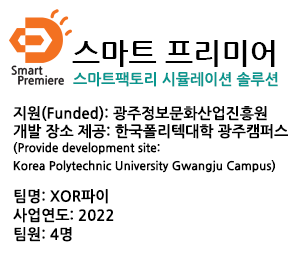
<style>
.page{position:relative;width:300px;height:280px;background:#ffffff}
.page>*{position:absolute;margin:0}
.t1{font:30px "NanumGothicBold";color:#000000}
.t2{font:15px "NanumGothicBold";color:#0a978f}
.t3{font:12px/18px "NanumGothicBold";color:#000000}
.t4{font:15px/18px "NanumGothicBold";color:#000000}
.t5{font:15px/19px "NanumGothicBold";color:#000000}
</style>
<div class="page">
<p class="t1" style="left:72px;top:40px;width:203px;height:27px">스마트 프리미어</p>
<p class="t2" style="left:73px;top:72px;width:205px;height:15px">스마트팩토리 시뮬레이션 솔루션</p>
<p class="t3" style="left:13px;top:106px;width:275px;height:67px"><span class="t4">지원(Funded): 광주정보문화산업진흥원<br>개발 장소 제공: 한국폴리텍대학 광주캠퍼스<br></span>(Provide development site: <br>Korea Polytechnic University Gwangju Campus)</p>
<p class="t5" style="left:13px;top:189px;width:101px;height:53px">팀명: XOR파이<br>사업연도: 2022<br>팀원: 4명</p>
</div>
